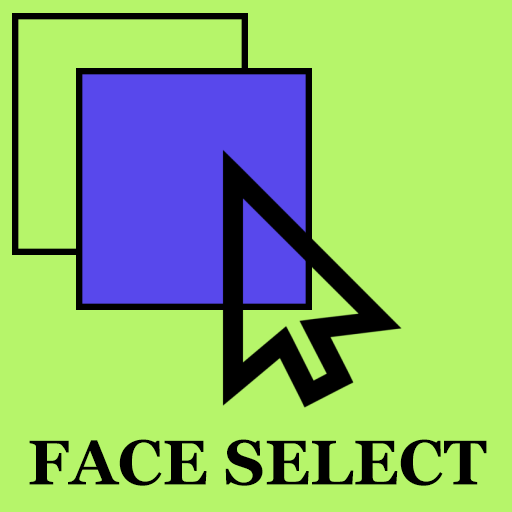
<style>
.page{position:relative;width:512px;height:512px;background:#b6f56a}
.page>*{position:absolute;margin:0}
.t1{font:62.9px "Georgia-Bold";color:#000000}
</style>
<div class="page">
<p class="t1" style="left:29px;top:439px;width:458px;height:47px">FACE SELECT</p>
</div>
